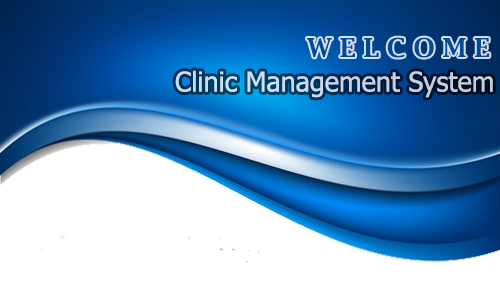
<style>
.page{position:relative;width:500px;height:283px;background:#ffffff}
.page>*{position:absolute;margin:0}
.t1{font:26px "LucidaBright-Demi";color:#014a99}
.t2{font:27.3px "Tahoma";color:#c8d9ee}
</style>
<div class="page">
<p class="t1" style="left:307px;top:37px;width:183px;height:21px">W E L C O M E</p>
<p class="t2" style="left:175px;top:70px;width:318px;height:28px">Clinic Management System</p>
</div>
